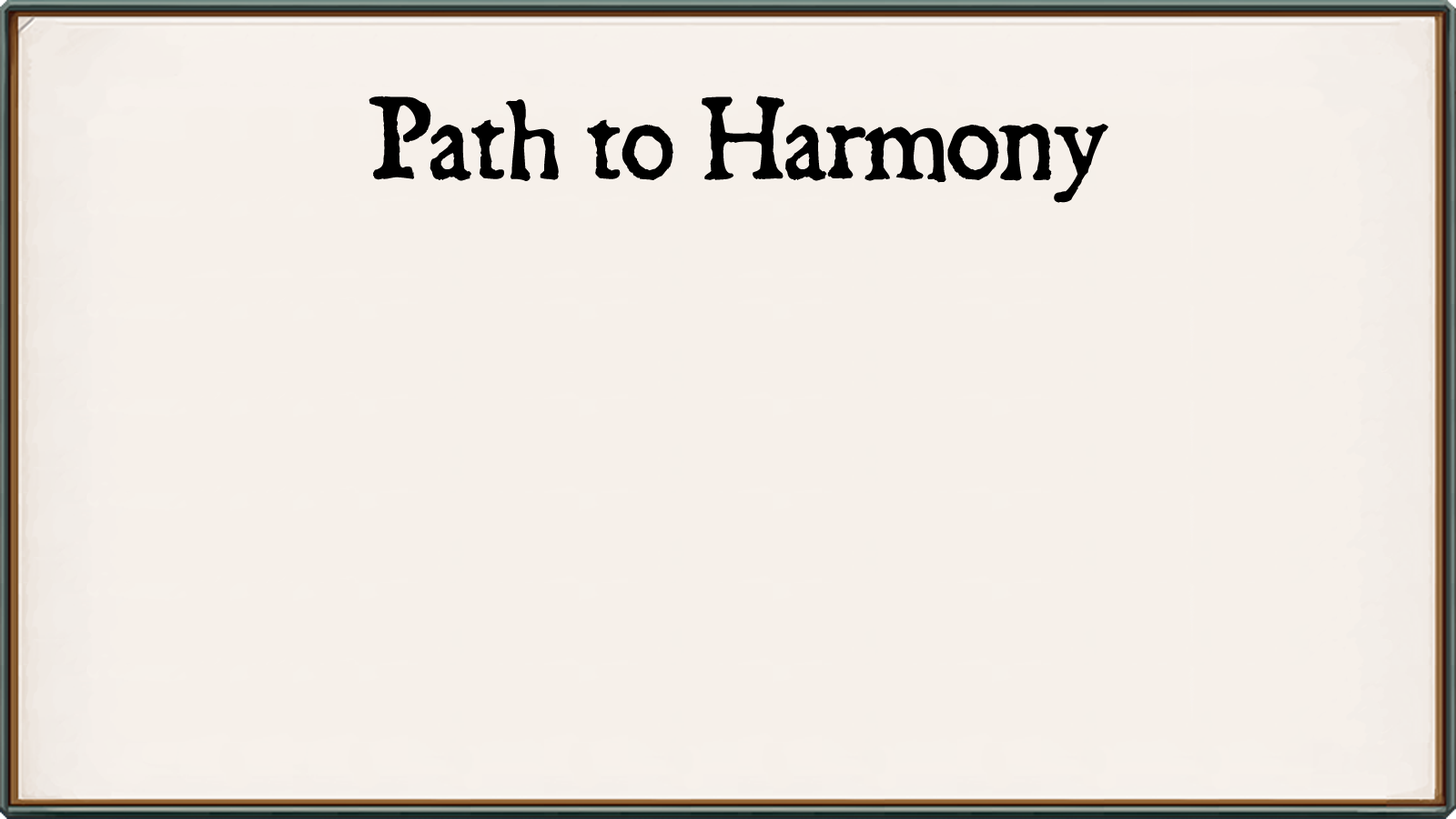
<style>
.page{position:relative;width:1456px;height:819px;background:#f6f0ea}
.page>*{position:absolute;margin:0}
.t1{font:101.9px "Dominican";color:#000000}
</style>
<div class="page">
<p class="t1" style="left:369px;top:96px;width:739px;height:107px">Path to Harmony</p>
</div>
